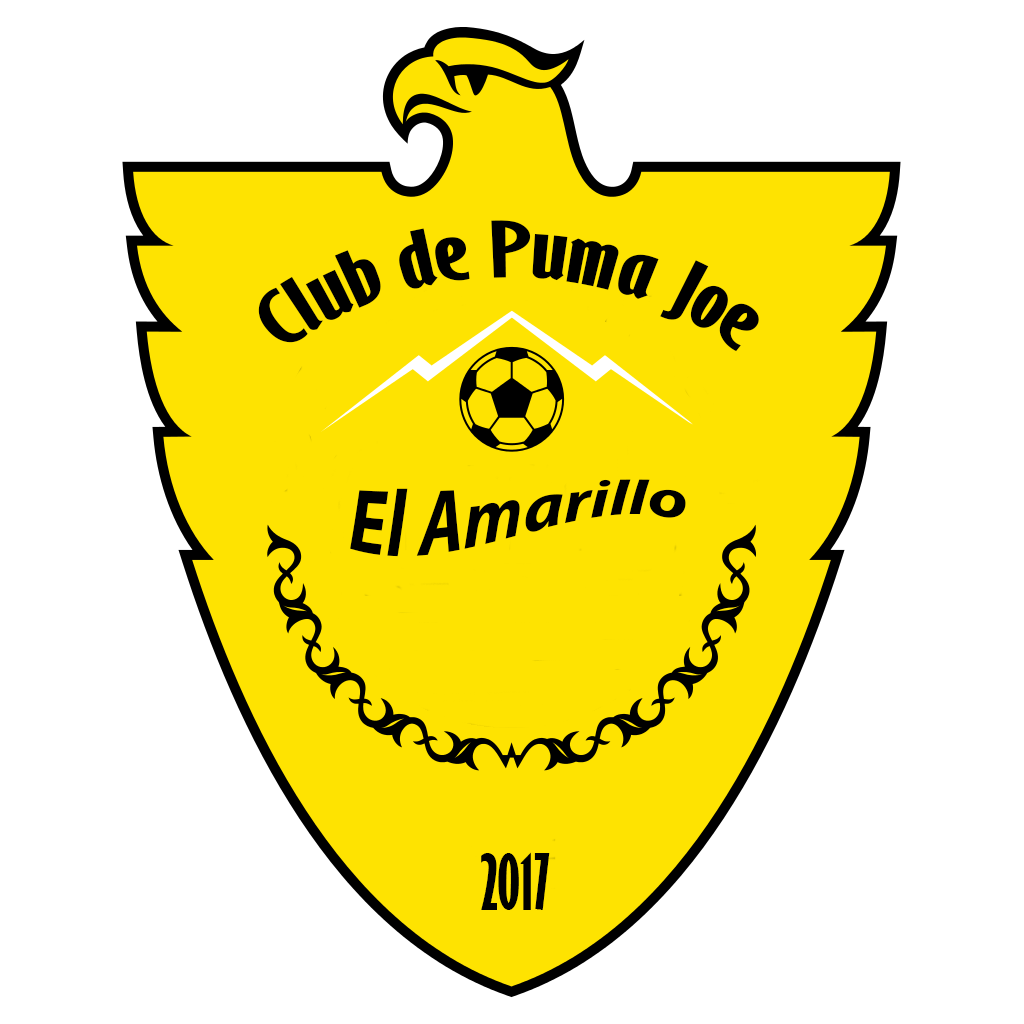
<style>
.page{position:relative;width:1024px;height:1024px;background:#ffffff}
.page>*{position:absolute;margin:0}
.t1{font:72px "GillSansMT-ExtraCondensedBold";color:#000000}
.t2{font:72px "MyriadPro-BoldIt";color:#000000}
</style>
<div class="page">
<p class="t1" style="left:258px;top:220px;width:501px;height:132px;text-align:center">Club de Puma Joe</p>
<p class="t2" style="left:350px;top:479px;width:336px;height:78px">El Amarillo</p>
<p class="t1" style="left:481px;top:852px;width:69px;height:58px">2017</p>
</div>
